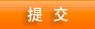
<style>
.page{position:relative;width:95px;height:29px}
.page>*{position:absolute;margin:0}
.t1{font:16px "SimHei";letter-spacing:0.06em;color:#ffffff}
</style>
<div class="page">
<p class="t1" style="left:27px;top:7px;width:41px;height:15px">提 交</p>
</div>
